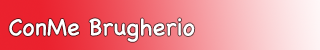
<style>
.page{position:relative;width:320px;height:50px}
.page>*{position:absolute;margin:0}
.t1{font:24px "Chalkboard";color:#ffffff}
</style>
<div class="page">
<p class="t1" style="left:9px;top:18px;width:186px;height:24px">ConMe Brugherio</p>
</div>
